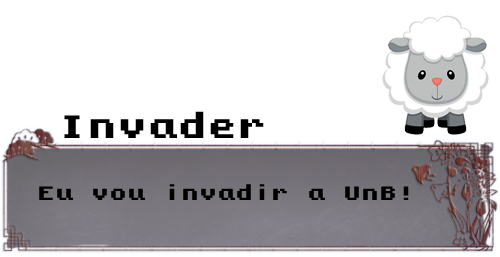
<style>
.page{position:relative;width:500px;height:257px;background:#ffffff}
.page>*{position:absolute;margin:0}
.t1{font:30px "KongtextRegular";color:#000000}
.t2{font:18px "KongtextRegular";color:#000000}
</style>
<div class="page">
<p class="t1" style="left:64px;top:111px;width:200px;height:27px">Invader</p>
<p class="t2" style="left:39px;top:184px;width:370px;height:16px">Eu vou invadir a UnB!</p>
</div>
